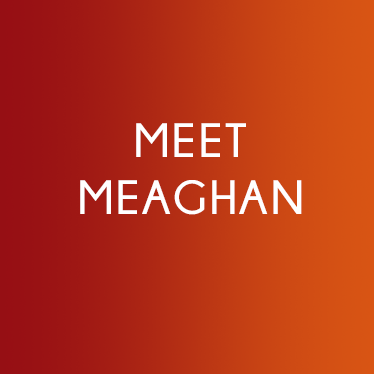
<style>
.page{position:relative;width:374px;height:374px}
.page>*{position:absolute;margin:0}
.t1{font:48px "Champagne&Limousines-Bold";letter-spacing:0.06em;color:#ffffff}
</style>
<div class="page">
<p class="t1" style="left:80px;top:123px;width:222px;height:92px;text-align:center">MEET<br>MEAGHAN</p>
</div>
